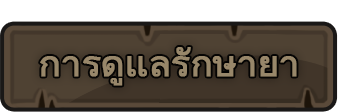
<style>
.page{position:relative;width:338px;height:112px}
.page>*{position:absolute;margin:0}
.t1{font:36px "Loma";letter-spacing:-0.025em;color:#98876a;text-transform:uppercase;font-weight:bold}
</style>
<div class="page">
<p class="t1" style="left:40px;top:47px;width:257px;height:39px">การดูแลรักษายา</p>
</div>
